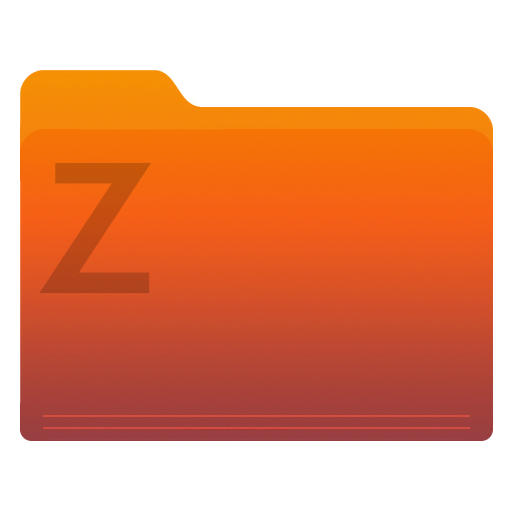
<style>
.page{position:relative;width:512px;height:512px;background:#ffffff}
.page>*{position:absolute;margin:0}
.t1{font:175.8px "ADAM.CGPRO";letter-spacing:0.1em;color:#c24b16;scale:1.08 1}
</style>
<div class="page">
<p class="t1" style="left:39px;top:162px;width:112px;height:132px">z</p>
</div>
